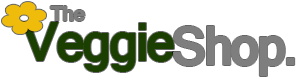
<style>
.page{position:relative;width:300px;height:80px;background:#ffffff}
.page>*{position:absolute;margin:0}
.t1{font:24px "Latha-Bold";letter-spacing:-0.075em;color:#7e7e7e}
.t2{font:60px "Latha-Bold";letter-spacing:-0.075em;color:#1b3f00}
.t3{font:60px "Latha-Bold";letter-spacing:-0.075em;color:#7e7e7e}
</style>
<div class="page">
<p class="t1" style="left:50px;top:6px;width:35px;height:15px">The</p>
<p class="t2" style="left:21px;top:22px;width:153px;height:50px">Veggie</p>
<p class="t3" style="left:173px;top:26px;width:122px;height:50px">Shop.</p>
</div>
